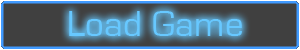
<style>
.page{position:relative;width:300px;height:50px;background:#404040}
.page>*{position:absolute;margin:0}
.t1{font:37.4px "EurostileRegular";color:#67c8ff}
</style>
<div class="page">
<p class="t1" style="left:69px;top:11px;width:173px;height:25px">Load Game</p>
</div>
